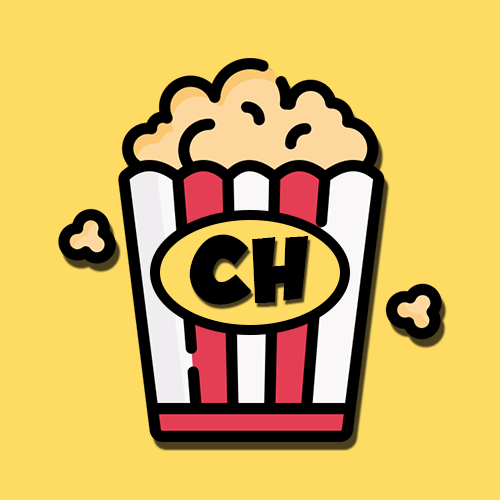
<style>
.page{position:relative;width:500px;height:500px;background:#fedb63}
.page>*{position:absolute;margin:0}
.t1{font:80px "GROBOLD";color:#000000}
</style>
<div class="page">
<p class="t1" style="left:189px;top:234px;width:120px;height:71px">CH</p>
</div>
